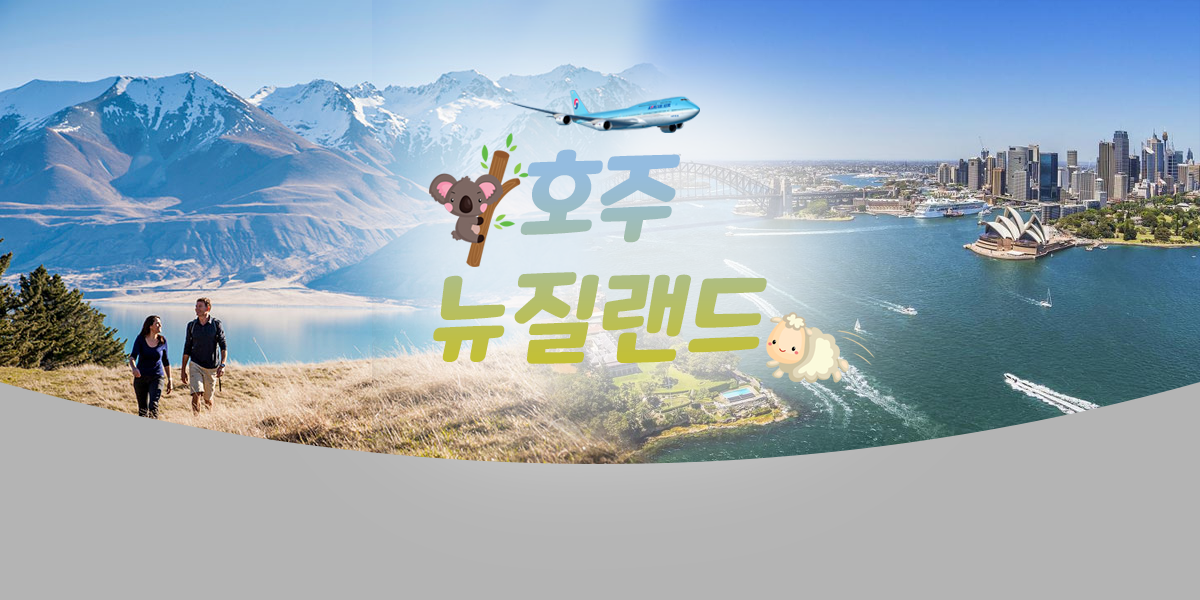
<style>
.page{position:relative;width:1200px;height:600px}
.page>*{position:absolute;margin:0}
.t1{font:100px "MaplestoryBold";font-style:italic}
</style>
<div class="page">
<p class="t1" style="left:433px;top:149px;width:334px;height:215px;text-align:center">호주<br>뉴질랜드</p>
</div>
